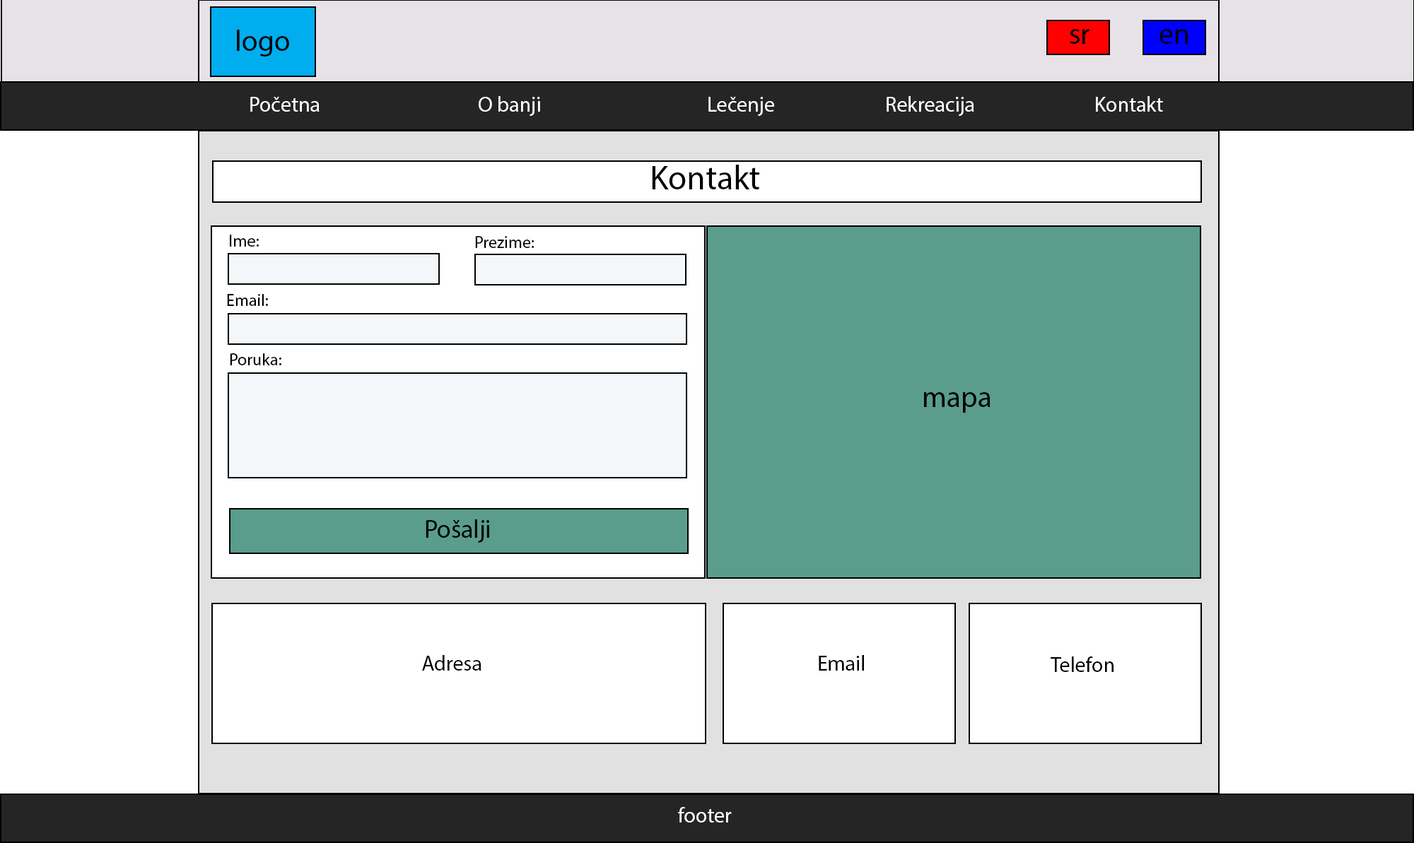
<style>
.page{position:relative;width:1414px;height:843px;background:#ffffff}
.page>*{position:absolute;margin:0}
.t1{font:29.5px "MyriadPro-Regular";color:#000101}
.t2{font:21.2px "MyriadPro-Regular";color:#ffffff}
.t3{font:21.2px "MyriadPro-Regular";color:#000101}
.t4{font:33.9px "MyriadPro-Regular";color:#000000}
.t5{font:17px "MyriadPro-Regular";color:#000000}
.t6{font:29.5px "MyriadPro-Regular";color:#000000}
.t7{font:25.4px "MyriadPro-Regular";color:#000000}
.t8{font:21.2px "MyriadPro-Regular";color:#000000}
</style>
<div class="page">
<p class="t1" style="left:237px;top:30px;width:52px;height:27px">logo</p>
<p class="t1" style="left:1070px;top:29px;width:19px;height:15px">sr</p>
<p class="t1" style="left:1159px;top:29px;width:29px;height:15px">en</p>
<p class="t2" style="left:250px;top:96px;width:913px;height:20px"><span class="t3">  </span>Početna       O banji       Lečenje     Rekreacija   Kontakt</p>
<p class="t4" style="left:652px;top:165px;width:107px;height:24px">Kontakt</p>
<p class="t5" style="left:230px;top:235px;width:29px;height:12px">Ime:</p>
<p class="t5" style="left:475px;top:236px;width:59px;height:12px">Prezime:</p>
<p class="t5" style="left:227px;top:294px;width:41px;height:12px">Email:</p>
<p class="t5" style="left:230px;top:353px;width:51px;height:12px">Poruka:</p>
<p class="t6" style="left:923px;top:392px;width:67px;height:21px">mapa</p>
<p class="t7" style="left:426px;top:520px;width:63px;height:23px">Pošalji</p>
<p class="t8" style="left:422px;top:655px;width:59px;height:16px">Adresa</p>
<p class="t8" style="left:819px;top:655px;width:45px;height:16px">Email</p>
<p class="t8" style="left:1051px;top:657px;width:62px;height:15px">Telefon</p>
<p class="t2" style="left:678px;top:807px;width:54px;height:16px">footer</p>
</div>
